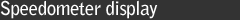
<style>
.page{position:relative;width:240px;height:20px;background:#333333}
.page>*{position:absolute;margin:0}
.t1{font:19px "BellGothicStd-Bold";letter-spacing:-0.025em;color:#ffffff}
</style>
<div class="page">
<p class="t1" style="left:0px;top:0px;width:158px;height:19px">Speedometer display</p>
</div>
